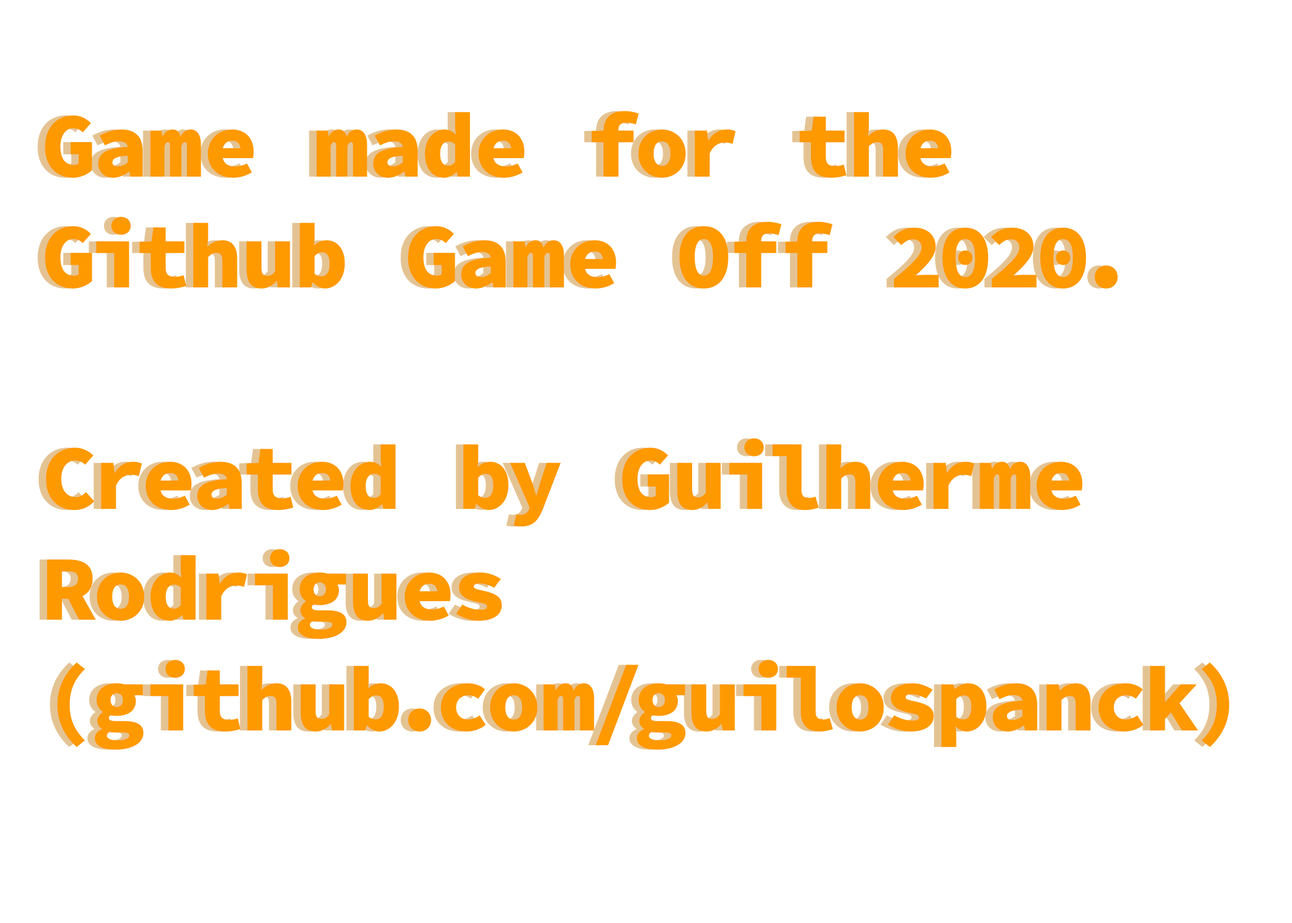
<style>
.page{position:relative;width:1292px;height:923px;background:#ffffff}
.page>*{position:absolute;margin:0}
.t1{font:92.3px "SourceCodeRoman_813.000wght"}
.t2{font:92.3px "SourceCodeRoman_813.000wght";color:#ff9900}
</style>
<div class="page">
<p class="t1" style="left:38px;top:111px;width:1184px;height:639px">Game made for the<br>Github Game Off 2020.<br><br>Created by Guilherme Rodrigues (github.com/guilospanck)</p>
<p class="t2" style="left:45px;top:111px;width:1184px;height:639px">Game made for the<br>Github Game Off 2020.<br><br>Created by Guilherme Rodrigues (github.com/guilospanck)</p>
</div>
